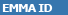
<style>
.page{position:relative;width:68px;height:15px;background:#3776ae}
.page>*{position:absolute;margin:0}
.t1{font:11px "Verdana-Bold";letter-spacing:-0.08em;color:#ffffff}
</style>
<div class="page">
<p class="t1" style="left:2px;top:4px;width:51px;height:8px">EMMA ID</p>
</div>
